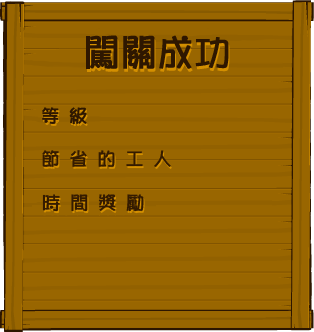
<style>
.page{position:relative;width:314px;height:332px;background:#996600}
.page>*{position:absolute;margin:0}
.t1{font:36px "Pop2EG-Bold-T-GB";color:#2e1700;font-weight:bold}
.t2{font:18px "Pop2EG-Bold-T-GB";color:#2e1700;font-weight:bold}
.t3{font:18px "Pop2EG-Bold-T-GB";color:#341b00;font-weight:bold}
</style>
<div class="page">
<p class="t1" style="left:86px;top:35px;width:143px;height:34px">闯关成功</p>
<p class="t2" style="left:42px;top:107px;width:45px;height:18px">等 级</p>
<p class="t3" style="left:42px;top:150px;width:129px;height:17px">节 省 的 工 人</p>
<p class="t3" style="left:42px;top:194px;width:102px;height:18px">时 间 奖 励</p>
</div>
